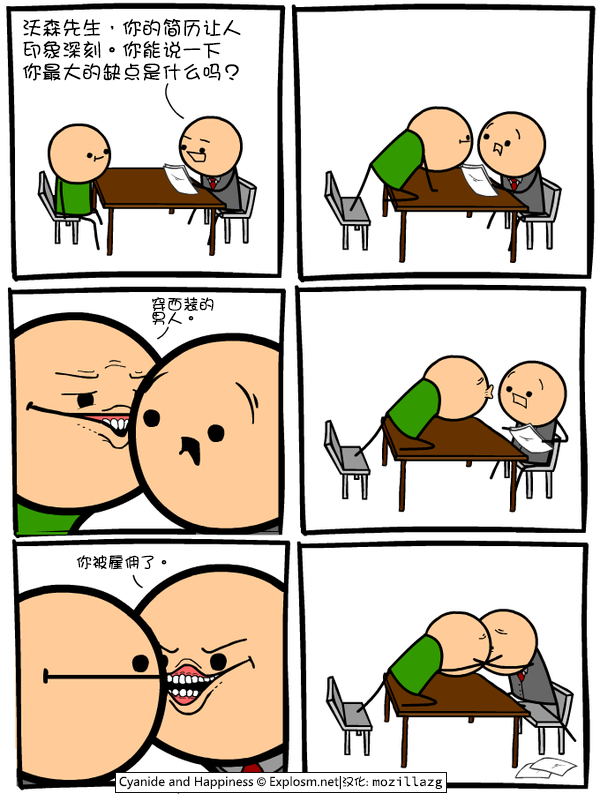
<style>
.page{position:relative;width:600px;height:794px;background:#ffffff}
.page>*{position:absolute;margin:0}
.t1{font:20px/22px "DFGirl";color:#000000}
.t2{font:16px/14px "DFGirl";color:#000000}
.t3{font:16px "DFGirl";color:#000000}
</style>
<div class="page">
<p class="t1" style="left:22px;top:18px;width:219px;height:63px">沃森先生，你的简历让人<br>印象深刻。你能说一下<br>你最大的缺点是什么吗？</p>
<p class="t2" style="left:152px;top:297px;width:62px;height:28px">穿西装的<br>男人。</p>
<p class="t3" style="left:76px;top:555px;width:91px;height:15px">你被雇佣了。</p>
</div>
